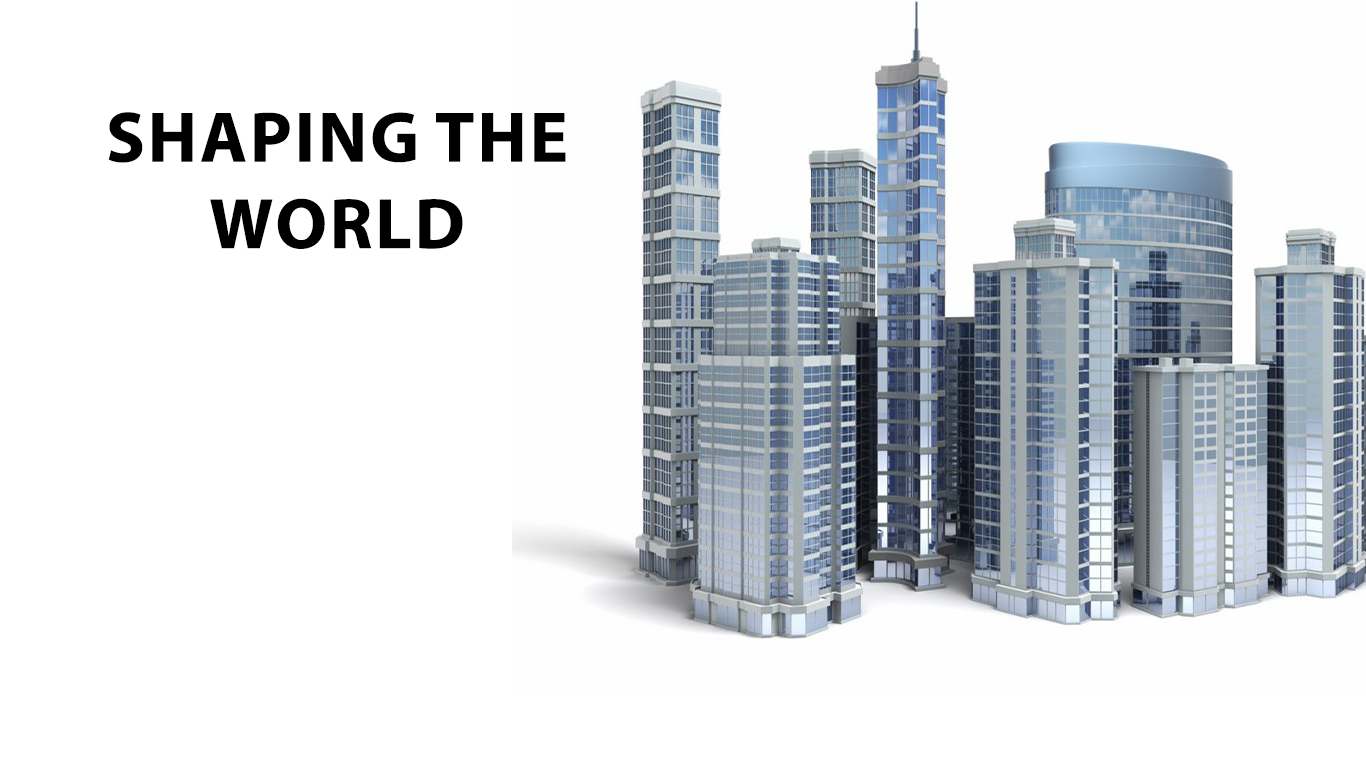
<style>
.page{position:relative;width:1366px;height:768px;background:#ffffff}
.page>*{position:absolute;margin:0}
.t1{font:72px "MyriadPro-Bold";letter-spacing:0.018em;color:#000000;text-transform:uppercase}
</style>
<div class="page">
<p class="t1" style="left:108px;top:112px;width:458px;height:137px;text-align:center">shaping the world</p>
</div>
